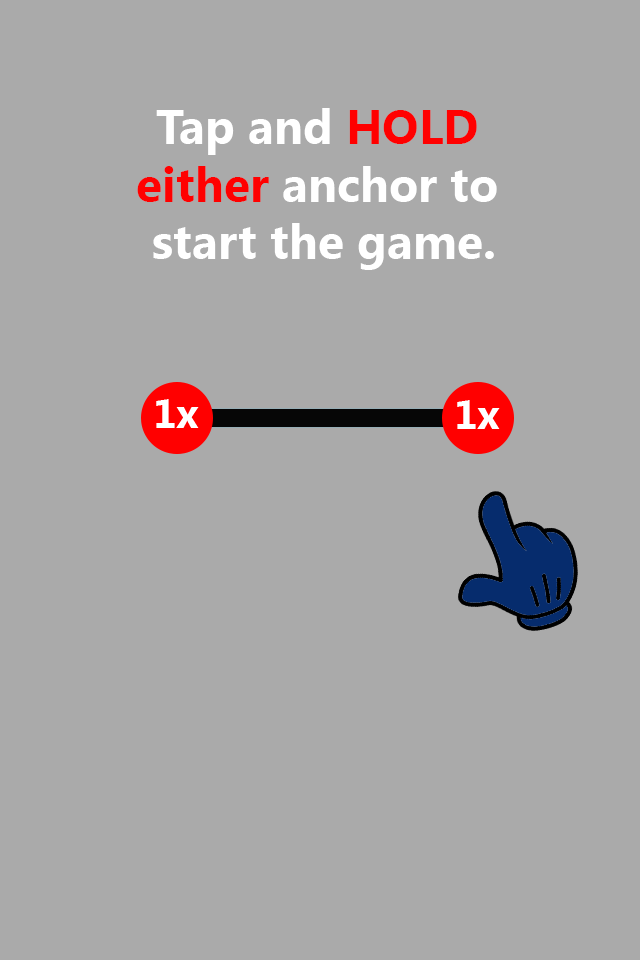
<style>
.page{position:relative;width:640px;height:960px;background:#aaaaaa}
.page>*{position:absolute;margin:0}
.t1{font:48px "LaoUI-Bold";color:#ffffff}
.t2{font:48px "LaoUI-Bold";color:#ff0000}
</style>
<div class="page">
<p class="t1" style="left:137px;top:108px;width:360px;height:162px;text-align:center">Tap and <span class="t2">HOLD <br>either</span> anchor to <br>start the game.</p>
</div>
